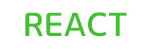
<style>
.page{position:relative;width:150px;height:50px;background:#ffffff}
.page>*{position:absolute;margin:0}
.t1{font:33.3px "GyeonggiTitleMOTF";color:#43bf32}
</style>
<div class="page">
<p class="t1" style="left:25px;top:12px;width:102px;height:25px">REACT</p>
</div>
